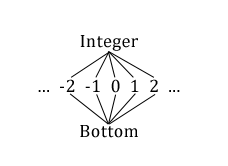
<style>
.page{position:relative;width:228px;height:166px;background:#ffffff}
.page>*{position:absolute;margin:0}
.t1{font:18px "Cambria";letter-spacing:0.025em;color:#000000}
</style>
<div class="page">
<p class="t1" style="left:80px;top:35px;width:58px;height:16px">Integer</p>
<p class="t1" style="left:38px;top:79px;width:142px;height:14px">...  -2  -1  0  1  2  ...</p>
<p class="t1" style="left:80px;top:125px;width:58px;height:13px">Bottom</p>
</div>
